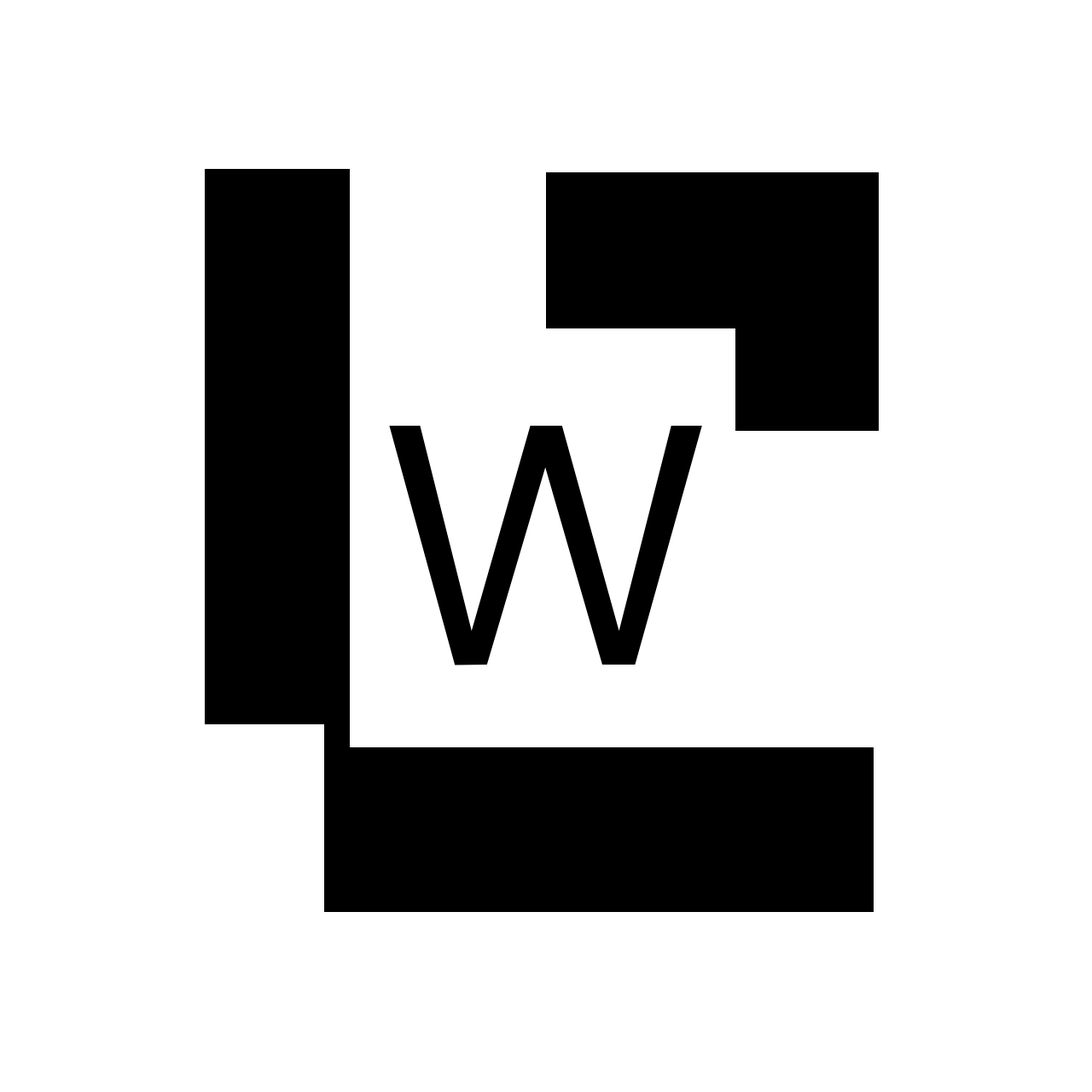
<style>
.page{position:relative;width:1092px;height:1092px;background:#ffffff}
.page>*{position:absolute;margin:0}
.t1{font:341.2px "DMSans-Regular";color:#000000}
</style>
<div class="page">
<p class="t1" style="left:389px;top:426px;width:313px;height:239px">W</p>
</div>
